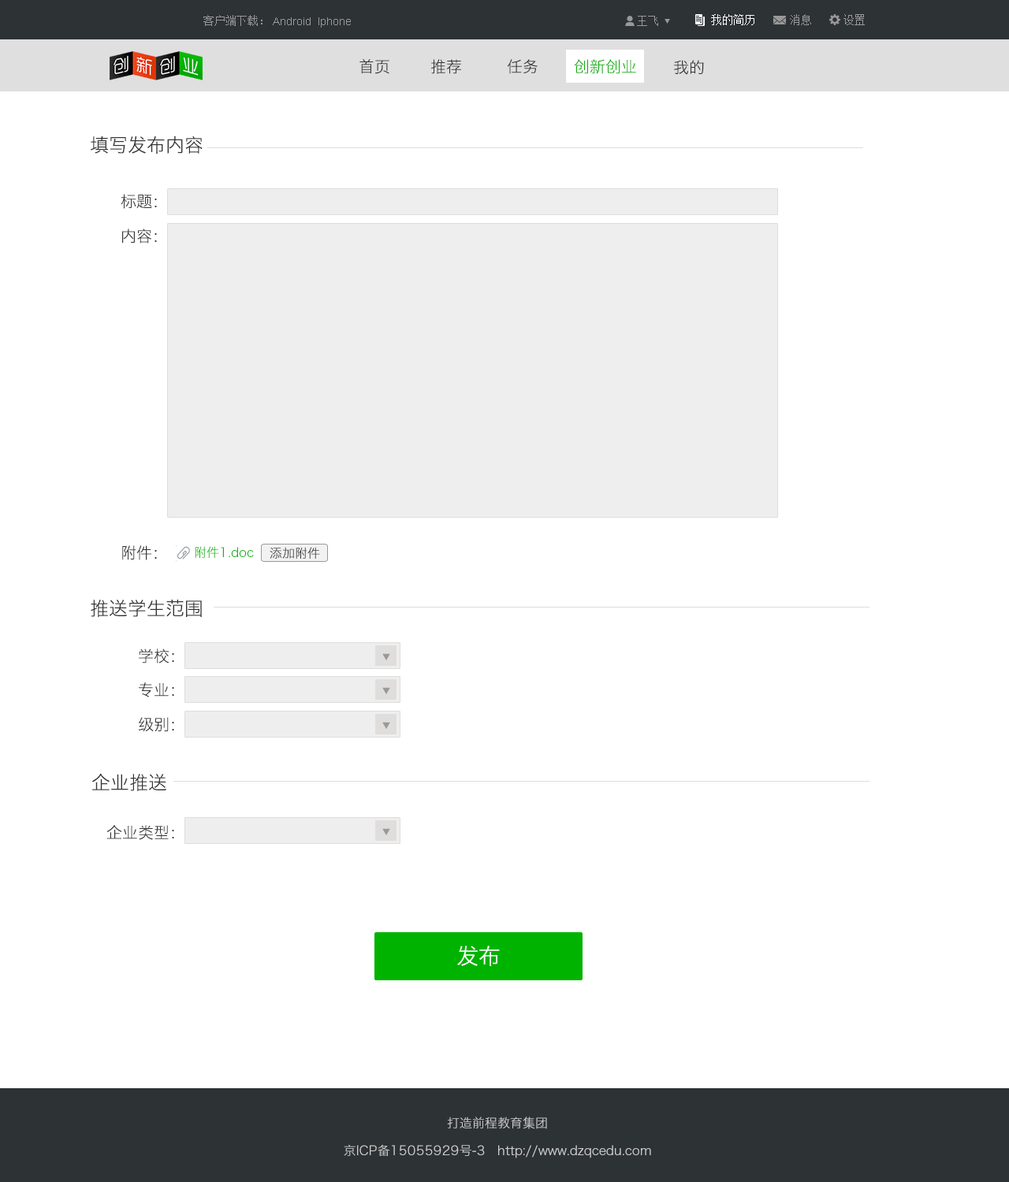
<style>
.page{position:relative;width:1009px;height:1182px;background:#ffffff}
.page>*{position:absolute;margin:0}
.t1{font:11px "SimSun";color:#999999}
.t2{font:11px "ArialMT";color:#999999}
.t3{font:11px "SimSun";color:#ffffff}
.t4{font:15.8px "HiraginoSansGB-W3";color:#333333}
.t5{font:15.8px "HiraginoSansGB-W3";color:#05ae04}
.t6{font:18.9px "HiraginoSansGB-W3";color:#333333}
.t7{font:12.6px "HiraginoSansGB-W3";color:#0fb80e}
.t8{font:12.6px "HiraginoSansGB-W3";color:#333333}
.t9{font:22.1px "HiraginoSansGB-W3";color:#ffffff}
.t10{font:12.6px "HiraginoSansGB-W3";color:#cccccc}
</style>
<div class="page">
<p class="t1" style="left:203px;top:15px;width:59px;height:11px">客户端下载：</p>
<p class="t2" style="left:273px;top:17px;width:78px;height:11px">Android  Iphone</p>
<p class="t1" style="left:637px;top:16px;width:21px;height:10px">王飞</p>
<p class="t3" style="left:711px;top:14px;width:43px;height:11px">我的简历</p>
<p class="t1" style="left:790px;top:14px;width:21px;height:11px">消息</p>
<p class="t1" style="left:843px;top:14px;width:22px;height:11px">设置</p>
<p class="t4" style="left:359px;top:59px;width:30px;height:15px">首页</p>
<p class="t4" style="left:431px;top:59px;width:30px;height:15px">推荐</p>
<p class="t4" style="left:507px;top:59px;width:30px;height:15px">任务</p>
<p class="t5" style="left:574px;top:59px;width:62px;height:15px">创新创业</p>
<p class="t4" style="left:674px;top:60px;width:30px;height:15px">我的</p>
<p class="t6" style="left:91px;top:136px;width:112px;height:18px">填写发布内容</p>
<p class="t4" style="left:121px;top:194px;width:36px;height:15px">标题：</p>
<p class="t4" style="left:121px;top:229px;width:36px;height:15px">内容：</p>
<p class="t4" style="left:122px;top:545px;width:35px;height:15px">附件：</p>
<p class="t7" style="left:195px;top:546px;width:59px;height:12px">附件1.doc</p>
<p class="t8" style="left:270px;top:547px;width:50px;height:12px">添加附件</p>
<p class="t6" style="left:91px;top:600px;width:111px;height:17px">推送学生范围</p>
<p class="t4" style="left:139px;top:649px;width:35px;height:15px">学校：</p>
<p class="t4" style="left:139px;top:682px;width:35px;height:15px">专业：</p>
<p class="t4" style="left:139px;top:717px;width:35px;height:15px">级别：</p>
<p class="t6" style="left:91px;top:773px;width:75px;height:18px">企业推送</p>
<p class="t4" style="left:106px;top:825px;width:68px;height:15px">企业类型：</p>
<p class="t9" style="left:457px;top:946px;width:43px;height:20px">发布</p>
<p class="t10" style="left:447px;top:1117px;width:100px;height:12px">打造前程教育集团</p>
<p class="t10" style="left:344px;top:1144px;width:307px;height:14px">京ICP备15055929号-3   http://www.dzqcedu.com</p>
</div>
